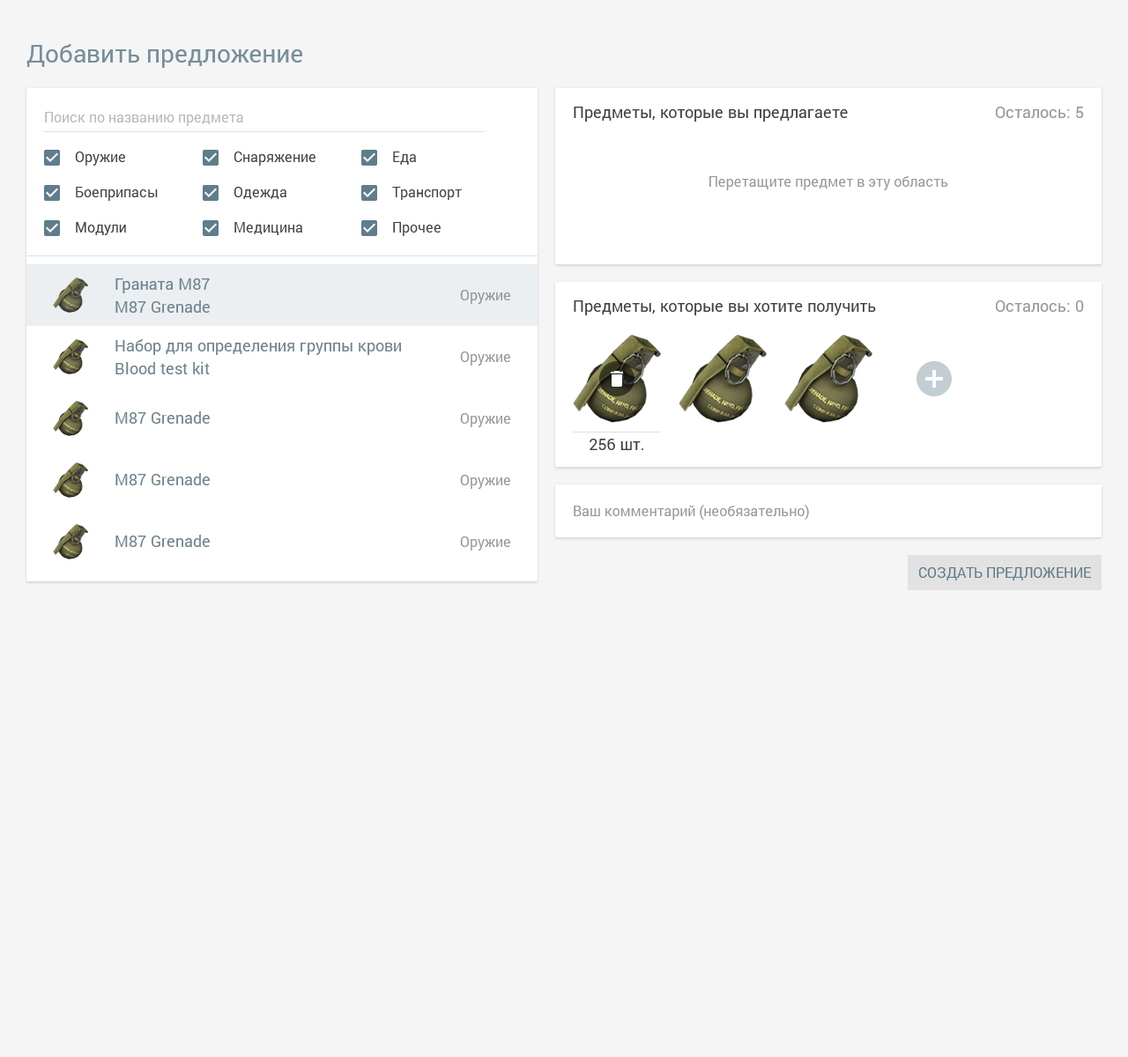
<style>
.page{position:relative;width:1128px;height:1057px;background:#f5f5f5}
.page>*{position:absolute;margin:0}
.t1{font:24.7px "Roboto-Regular";color:#607d8b}
.t2{font:14.1px "Roboto-Regular";color:#bababa}
.t3{font:15.9px "Roboto-Regular";color:#424242}
.t4{font:15.9px "Roboto-Regular";color:#999999}
.t5{font:14.1px "Roboto-Regular";color:#424242}
.t6{font:14.1px "Roboto-Regular";color:#999999}
.t7{font:15.9px "Roboto-Regular";color:#6f848f}
.t8{font:14.1px "Roboto-Regular";color:#929697}
.t9{font:15.9px "Roboto-Regular";color:#71858f}
.t10{font:14.1px "Roboto-Regular";color:#607d8b;text-transform:uppercase}
</style>
<div class="page">
<p class="t1" style="left:26px;top:44px;width:276px;height:24px;opacity:0.87">Добавить предложение</p>
<p class="t2" style="left:45px;top:112px;width:198px;height:14px">Поиск по названию предмета</p>
<p class="t3" style="left:574px;top:107px;width:274px;height:15px">Предметы, которые вы предлагаете</p>
<p class="t4" style="left:996px;top:107px;width:88px;height:11px">Осталось: 5</p>
<p class="t5" style="left:75px;top:152px;width:50px;height:14px">Оружие</p>
<p class="t5" style="left:234px;top:152px;width:81px;height:14px">Снаряжение</p>
<p class="t5" style="left:393px;top:152px;width:23px;height:13px">Еда</p>
<p class="t6" style="left:709px;top:176px;width:239px;height:14px">Перетащите предмет в эту область</p>
<p class="t5" style="left:76px;top:187px;width:82px;height:14px">Боеприпасы</p>
<p class="t5" style="left:233px;top:187px;width:53px;height:12px">Одежда</p>
<p class="t5" style="left:392px;top:187px;width:70px;height:13px">Транспорт</p>
<p class="t5" style="left:76px;top:222px;width:50px;height:13px">Модули</p>
<p class="t5" style="left:234px;top:222px;width:68px;height:13px">Медицина</p>
<p class="t5" style="left:393px;top:222px;width:48px;height:14px">Прочее</p>
<p class="t7" style="left:115px;top:278px;width:95px;height:15px">Граната M87</p>
<p class="t8" style="left:460px;top:290px;width:50px;height:14px">Оружие</p>
<p class="t7" style="left:115px;top:300px;width:95px;height:13px">M87 Grenade</p>
<p class="t3" style="left:574px;top:300px;width:302px;height:15px">Предметы, которые вы хотите получить</p>
<p class="t4" style="left:996px;top:300px;width:88px;height:12px">Осталось: 0</p>
<p class="t9" style="left:115px;top:339px;width:286px;height:16px">Набор для определения группы крови</p>
<p class="t6" style="left:460px;top:352px;width:50px;height:14px">Оружие</p>
<p class="t9" style="left:115px;top:361px;width:95px;height:13px">Blood test kit</p>
<p class="t9" style="left:115px;top:411px;width:95px;height:13px">M87 Grenade</p>
<p class="t6" style="left:460px;top:413px;width:50px;height:14px">Оружие</p>
<p class="t3" style="left:589px;top:439px;width:54px;height:11px">256 шт.</p>
<p class="t9" style="left:115px;top:473px;width:95px;height:12px">M87 Grenade</p>
<p class="t6" style="left:460px;top:475px;width:50px;height:14px">Оружие</p>
<p class="t6" style="left:574px;top:505px;width:235px;height:15px">Ваш комментарий (необязательно)</p>
<p class="t9" style="left:115px;top:535px;width:95px;height:12px">M87 Grenade</p>
<p class="t6" style="left:460px;top:537px;width:50px;height:14px">Оружие</p>
<p class="t10" style="left:919px;top:567px;width:172px;height:14px">Создать предложение</p>
</div>
